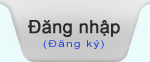
<style>
.page{position:relative;width:150px;height:62px}
.page>*{position:absolute;margin:0}
.t1{font:18px "ArialMT";color:#2a2a2a;font-weight:bold}
.t2{font:9.6px "ArialMT";letter-spacing:0.1em;color:#2447e0;scale:1.25 1}
</style>
<div class="page">
<p class="t1" style="left:28px;top:20px;width:92px;height:17px">Đăng nhập</p>
<p class="t2" style="left:43px;top:40px;width:61px;height:9px">(Đăng ký)</p>
</div>
